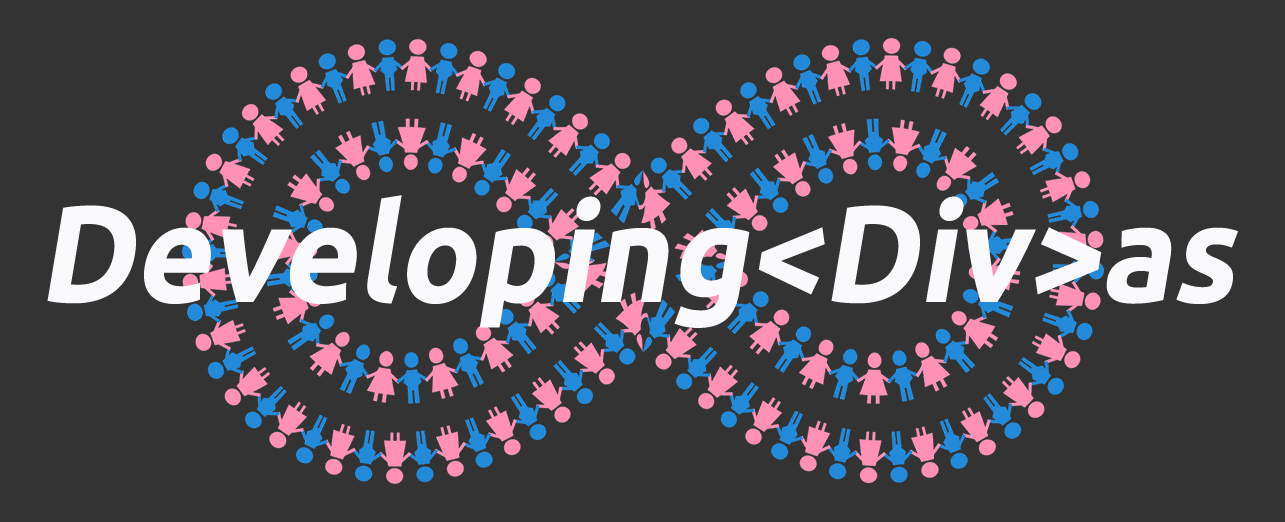
<style>
.page{position:relative;width:1285px;height:522px;background:#333333}
.page>*{position:absolute;margin:0}
.t1{font:137.5px "Ubuntu-Bold";color:#faf9fc;font-style:italic;scale:0.95 1}
</style>
<div class="page">
<p class="t1" style="left:47px;top:195px;width:1191px;height:133px">Developing&lt;Div&gt;as</p>
</div>
